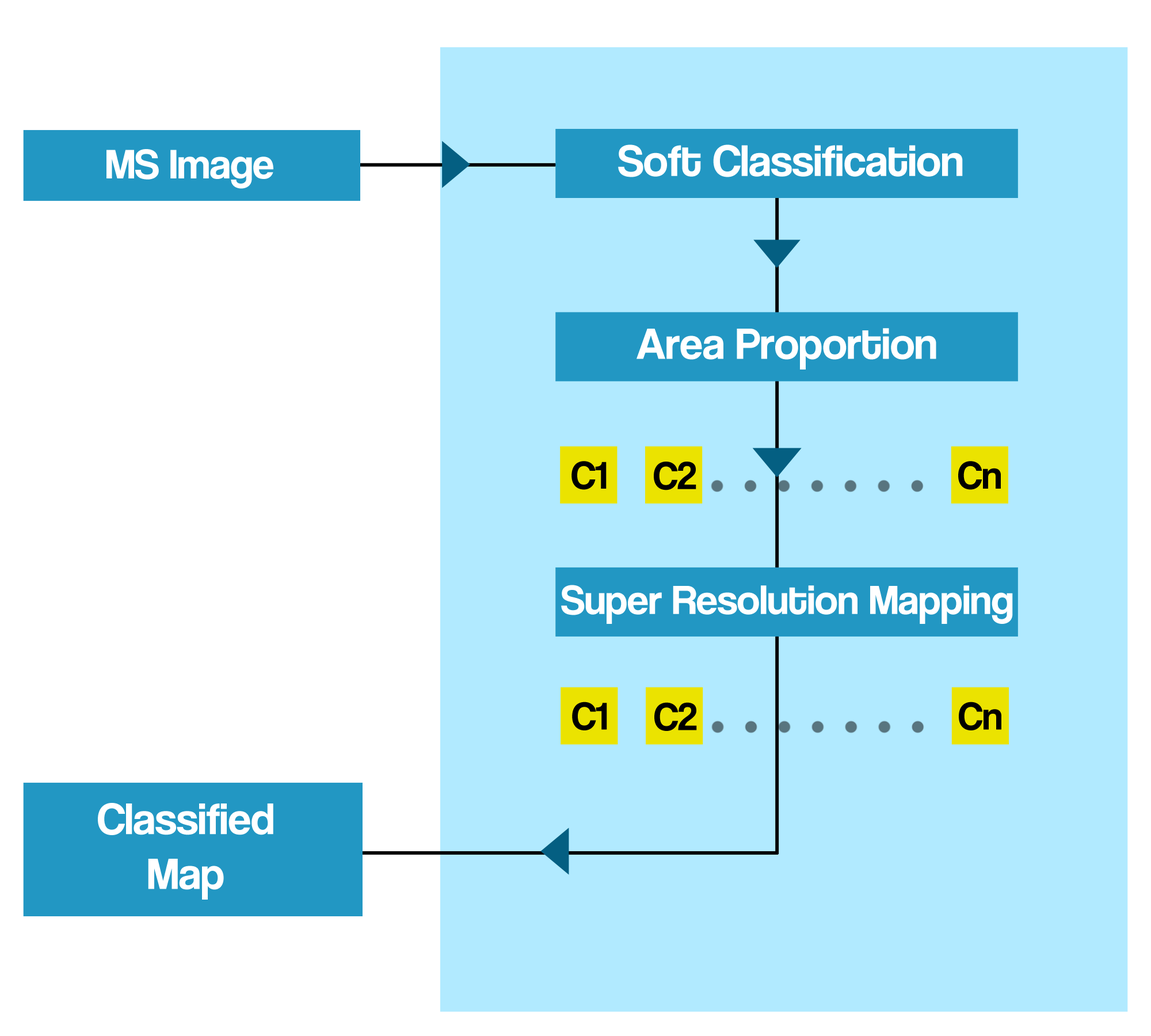
<style>
.page{position:relative;width:1151px;height:1036px;background:#b1eaff}
.page>*{position:absolute;margin:0}
.t1{font:42.8px "CoolveticaRg-Regular";color:#ffffff}
.t2{font:45.7px "CoolveticaRg-Regular";color:#ffffff}
.t3{font:40px "CoolveticaRg-Regular";color:#000000}
.t4{font:42.3px "CoolveticaRg-Regular";color:#ffffff}
</style>
<div class="page">
<p class="t1" style="left:106px;top:149px;width:167px;height:40px">MS Image</p>
<p class="t2" style="left:618px;top:144px;width:345px;height:33px">Soft Classification</p>
<p class="t2" style="left:637px;top:328px;width:299px;height:41px">Area Proportion</p>
<p class="t3" style="left:571px;top:461px;width:36px;height:29px">C1</p>
<p class="t3" style="left:654px;top:462px;width:42px;height:28px">C2</p>
<p class="t3" style="left:958px;top:461px;width:43px;height:29px">Cn</p>
<p class="t4" style="left:561px;top:585px;width:452px;height:39px">Super Resolution Mapping</p>
<p class="t3" style="left:572px;top:702px;width:35px;height:28px">C1</p>
<p class="t3" style="left:959px;top:702px;width:42px;height:28px">Cn</p>
<p class="t3" style="left:654px;top:702px;width:43px;height:29px">C2</p>
<p class="t2" style="left:98px;top:803px;width:175px;height:97px;text-align:center">Classified<br>Map</p>
</div>
